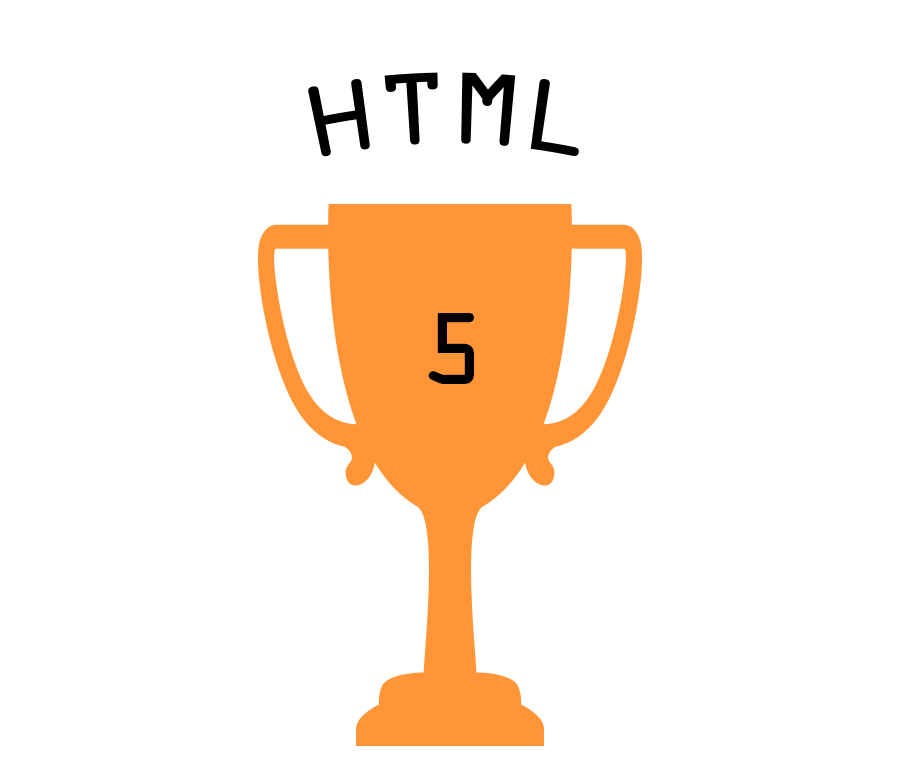
<style>
.page{position:relative;width:900px;height:768px;background:#ffffff}
.page>*{position:absolute;margin:0}
.t1{font:91.7px "OCRAStd";color:#000000}
</style>
<div class="page">
<p class="t1" style="left:308px;top:72px;width:271px;height:85px">HTML</p>
<p class="t1" style="left:428px;top:313px;width:46px;height:71px">5</p>
</div>
